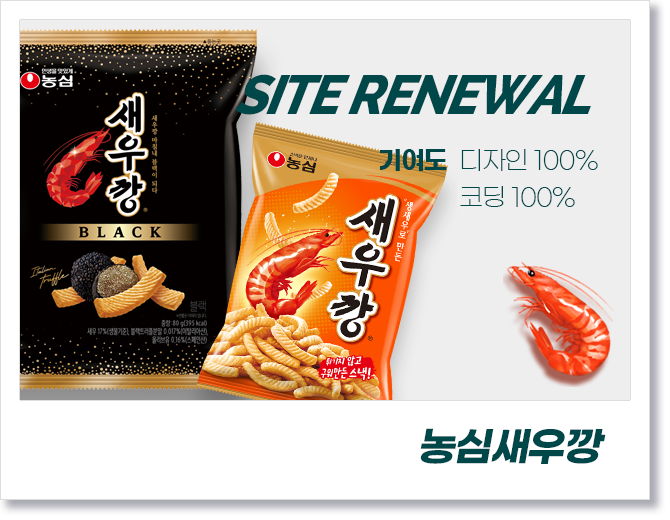
<style>
.page{position:relative;width:670px;height:520px;background:#ffffff}
.page>*{position:absolute;margin:0}
.t1{font:55px "Raleway-ExtraBoldItalic";letter-spacing:-0.05em;color:#00474a;font-style:italic}
.t2{font:25px "GmarketSansTTFBold";letter-spacing:-0.05em;color:#00474a}
.t3{font:25px/37px "GmarketSansTTFLight";letter-spacing:-0.05em;color:#00474a}
.t4{font:40px "GmarketSansTTFBold";letter-spacing:-0.05em;color:#00474a;font-style:italic}
</style>
<div class="page">
<p class="t1" style="left:235px;top:74px;width:356px;height:41px">SITE RENEWAL</p>
<p class="t2" style="left:380px;top:149px;width:67px;height:22px">기여도</p>
<p class="t3" style="left:460px;top:149px;width:138px;height:58px">디자인 100%<br>코딩 100%</p>
<p class="t4" style="left:420px;top:428px;width:186px;height:36px">농심새우깡</p>
</div>
